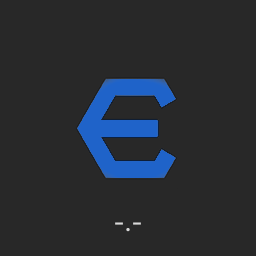
<style>
.page{position:relative;width:256px;height:256px;background:#282828}
.page>*{position:absolute;margin:0}
.t1{font:24px "Inter-Regular";color:#d9d9d9}
</style>
<div class="page">
<p class="t1" style="left:114px;top:222px;width:28px;height:10px">-.-</p>
</div>
